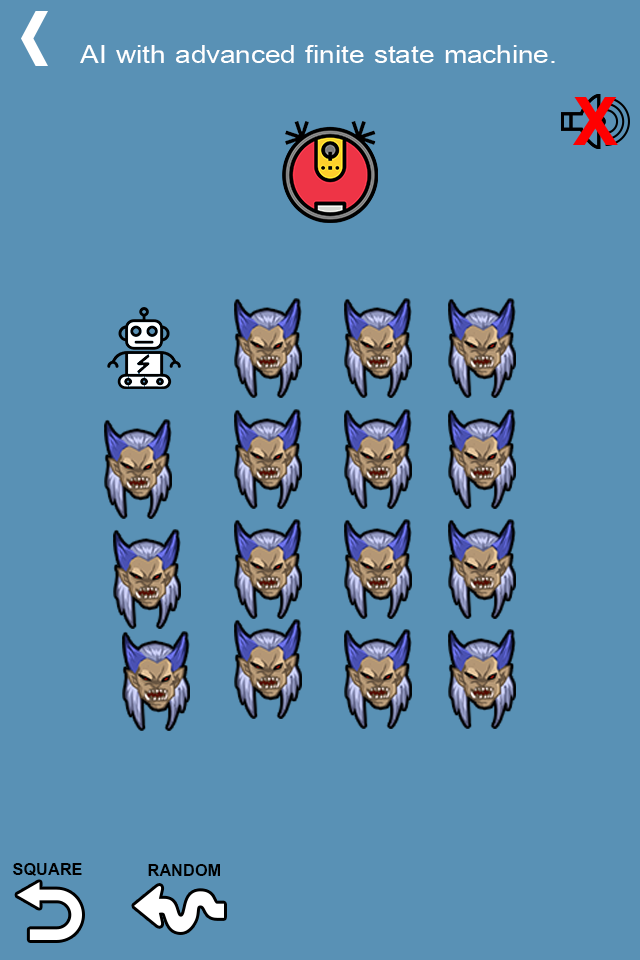
<style>
.page{position:relative;width:640px;height:960px;background:#5991b5}
.page>*{position:absolute;margin:0}
.t1{font:38.3px "BrowalliaNew";color:#ffffff;scale:1.11 1}
.t2{font:25px "BrowalliaNew-Bold";color:#000000}
</style>
<div class="page">
<p class="t1" style="left:80px;top:45px;width:475px;height:18px">AI with advanced finite state machine.</p>
<p class="t2" style="left:13px;top:863px;width:69px;height:13px">SQUARE</p>
<p class="t2" style="left:148px;top:864px;width:72px;height:12px">RANDOM</p>
</div>
